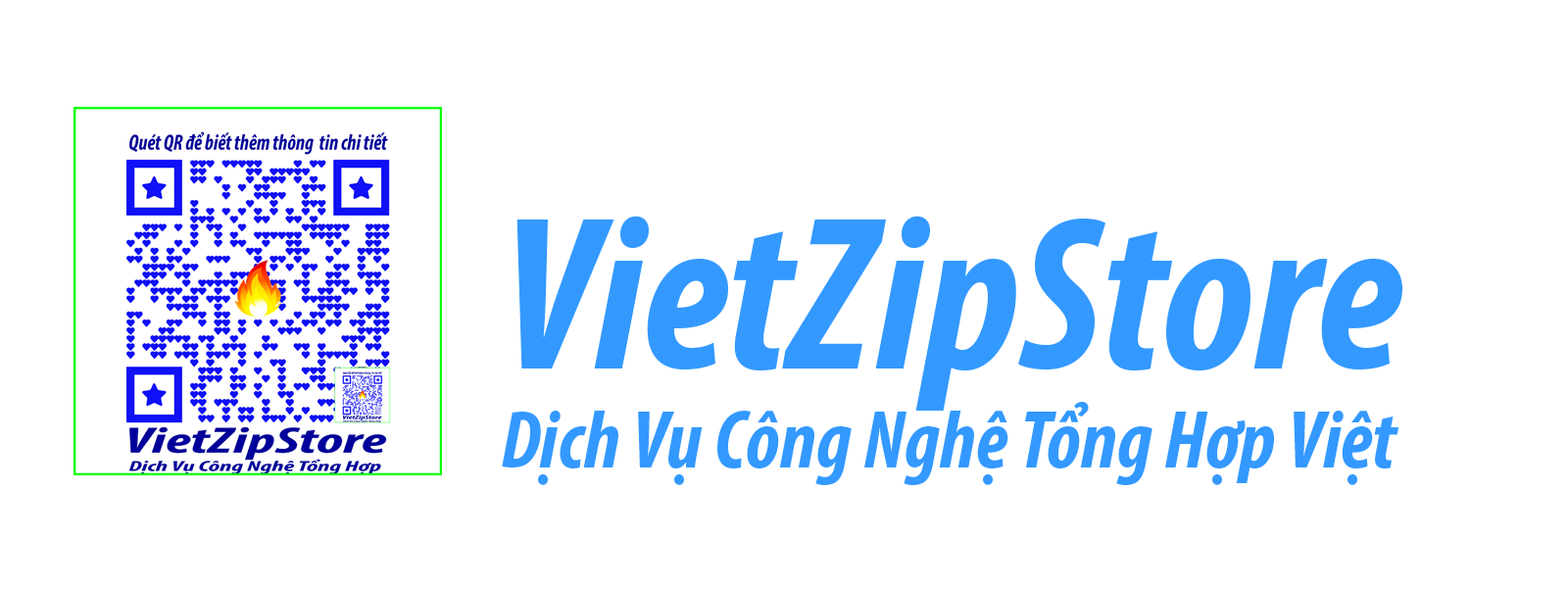
<style>
.page{position:relative;width:1568px;height:589px;background:#ffffff}
.page>*{position:absolute;margin:0}
.t1{font:82.4px "MyriadPro-BoldCondIt";color:#3399ff}
.t2{font:220.5px "MyriadPro-BoldCondIt";color:#3399ff}
</style>
<div class="page">
<p class="t1" style="left:502px;top:216px;width:900px;height:269px"><span class="t2">VietZipStore<br></span>Dịch Vụ Công Nghệ Tổng Hợp Việt</p>
</div>
